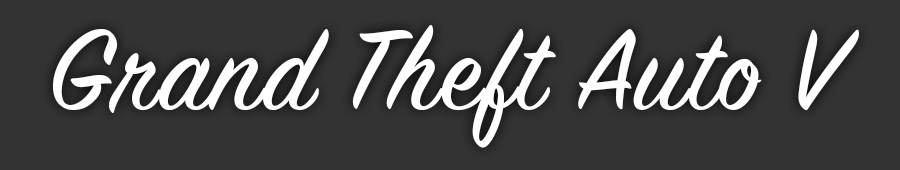
<style>
.page{position:relative;width:900px;height:170px;background:#333333}
.page>*{position:absolute;margin:0}
.t1{font:126.2px "SignPainter-HouseScript";letter-spacing:0.02em;color:#ffffff}
</style>
<div class="page">
<p class="t1" style="left:53px;top:25px;width:806px;height:123px">Grand Theft Auto V</p>
</div>
